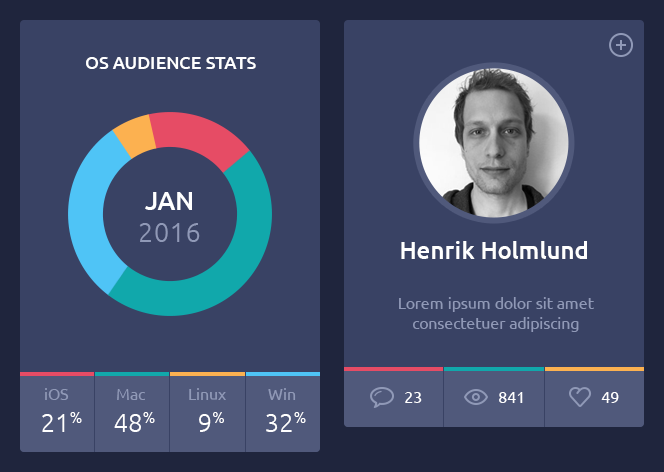
<style>
.page{position:relative;width:664px;height:472px;background:#394264}
.page>*{position:absolute;margin:0}
.t1{font:18px "Ubuntu-Medium";color:#ffffff;text-transform:uppercase}
.t2{font:27px/31.7px "Ubuntu-Light";color:#9099b7}
.t3{font:26px/31.7px "Ubuntu-Medium";color:#ffffff}
.t4{font:24px "Ubuntu-Medium";color:#ffffff}
.t5{font:16px/20px "Ubuntu";color:#9099b7}
.t6{font:16px "Ubuntu";color:#9099b7}
.t7{font:16px "Ubuntu";color:#ffffff}
.t8{font:26px "Ubuntu-Light";color:#ffffff}
</style>
<div class="page">
<p class="t1" style="left:86px;top:57px;width:170px;height:12px">OS AUDIENCE STATS</p>
<p class="t2" style="left:139px;top:192px;width:61px;height:50px;text-align:center"><span class="t3">JAN<br></span>2016</p>
<p class="t4" style="left:401px;top:241px;width:186px;height:18px">Henrik Holmlund</p>
<p class="t5" style="left:399px;top:297px;width:195px;height:35px;text-align:center">Lorem ipsum dolor sit amet <br>consectetuer adipiscing</p>
<p class="t6" style="left:45px;top:388px;width:24px;height:12px">iOS</p>
<p class="t6" style="left:117px;top:389px;width:28px;height:11px">Mac</p>
<p class="t6" style="left:189px;top:388px;width:37px;height:12px">Linux</p>
<p class="t6" style="left:268px;top:388px;width:28px;height:12px">Win</p>
<p class="t7" style="left:405px;top:392px;width:17px;height:11px">23</p>
<p class="t7" style="left:499px;top:392px;width:24px;height:11px">841</p>
<p class="t7" style="left:601px;top:392px;width:18px;height:11px">49</p>
<p class="t8" style="left:42px;top:412px;width:40px;height:20px">21%</p>
<p class="t8" style="left:114px;top:412px;width:41px;height:20px">48%</p>
<p class="t8" style="left:199px;top:412px;width:25px;height:20px">9%</p>
<p class="t8" style="left:266px;top:412px;width:40px;height:20px">32%</p>
</div>
